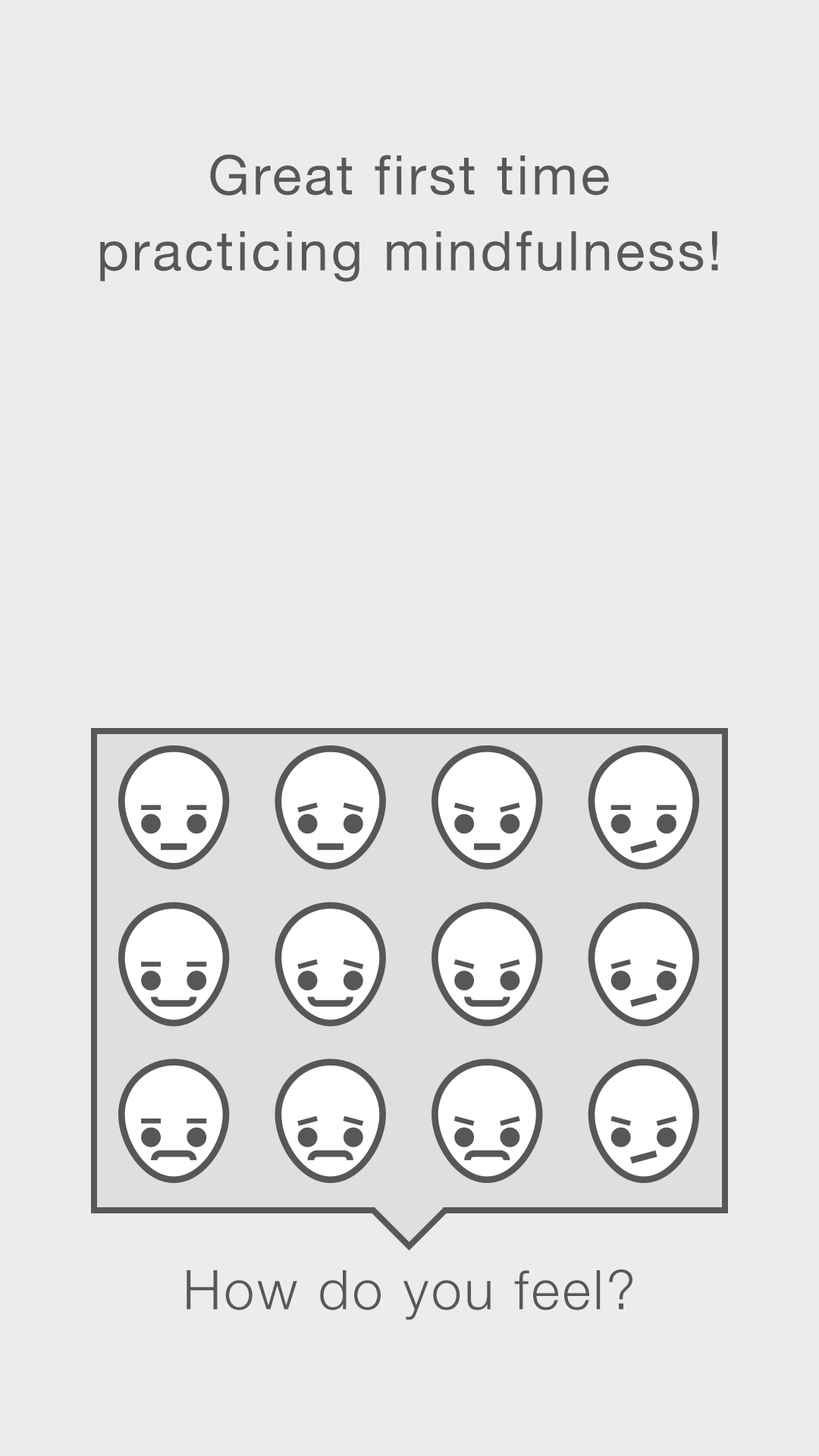
<style>
.page{position:relative;width:819px;height:1456px;background:#ececec}
.page>*{position:absolute;margin:0}
.t1{font:54.6px/75.8px "HelveticaNeue";letter-spacing:0.05em;color:#585858}
.t2{font:54.6px "HelveticaNeue-Light";letter-spacing:0.05em;color:#585858}
</style>
<div class="page">
<p class="t1" style="left:100px;top:154px;width:618px;height:128px;text-align:center">Great first time practicing mindfulness!</p>
<p class="t2" style="left:187px;top:1269px;width:445px;height:51px">How do you feel?</p>
</div>
